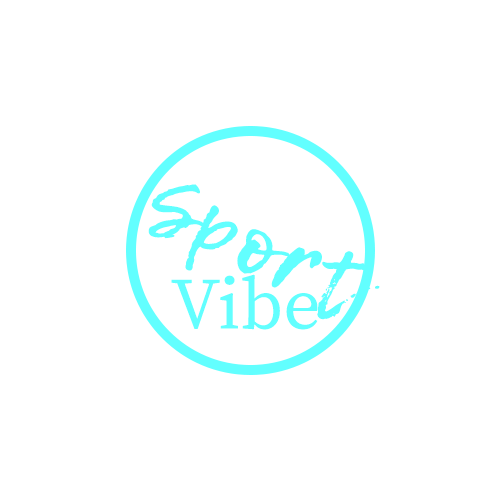
<style>
.page{position:relative;width:500px;height:500px;background:#ffffff}
.page>*{position:absolute;margin:0}
.t1{font:84.5px "LemonTuesday";color:#62ffff;font-weight:bold;scale:1.07 1}
.t2{font:72.8px "SourceSerifRoman-Regular";color:#62ffff;font-weight:bold}
</style>
<div class="page">
<p class="t1" style="left:148px;top:184px;width:232px;height:136px;rotate:23deg">Sport</p>
<p class="t2" style="left:171px;top:274px;width:147px;height:56px">Vibe</p>
</div>
